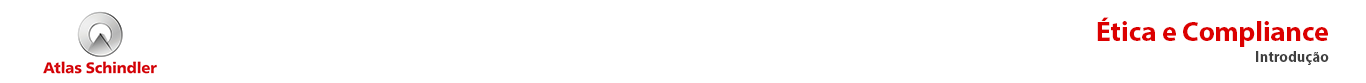
<style>
.page{position:relative;width:1366px;height:83px;background:#ffffff}
.page>*{position:absolute;margin:0}
.t1{font:28px/21px "MyriadPro-Bold";color:#dc0000}
.t2{font:15px/21px "MyriadPro-Bold";color:#404040}
</style>
<div class="page">
<p class="t1" style="left:1097px;top:17px;width:232px;height:48px;text-align:right">Ética e Compliance<br><span class="t2">Introdução</span></p>
</div>
